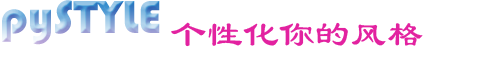
<style>
.page{position:relative;width:500px;height:60px;background:#ffffff}
.page>*{position:absolute;margin:0}
.t1{font:48px "Bauhaus93"}
.t2{font:36px "LiSu";color:#e222a0}
</style>
<div class="page">
<p class="t1" style="left:2px;top:0px;width:158px;height:45px">pySTYLE</p>
<p class="t2" style="left:171px;top:22px;width:252px;height:25px">个性化你的风格</p>
</div>
